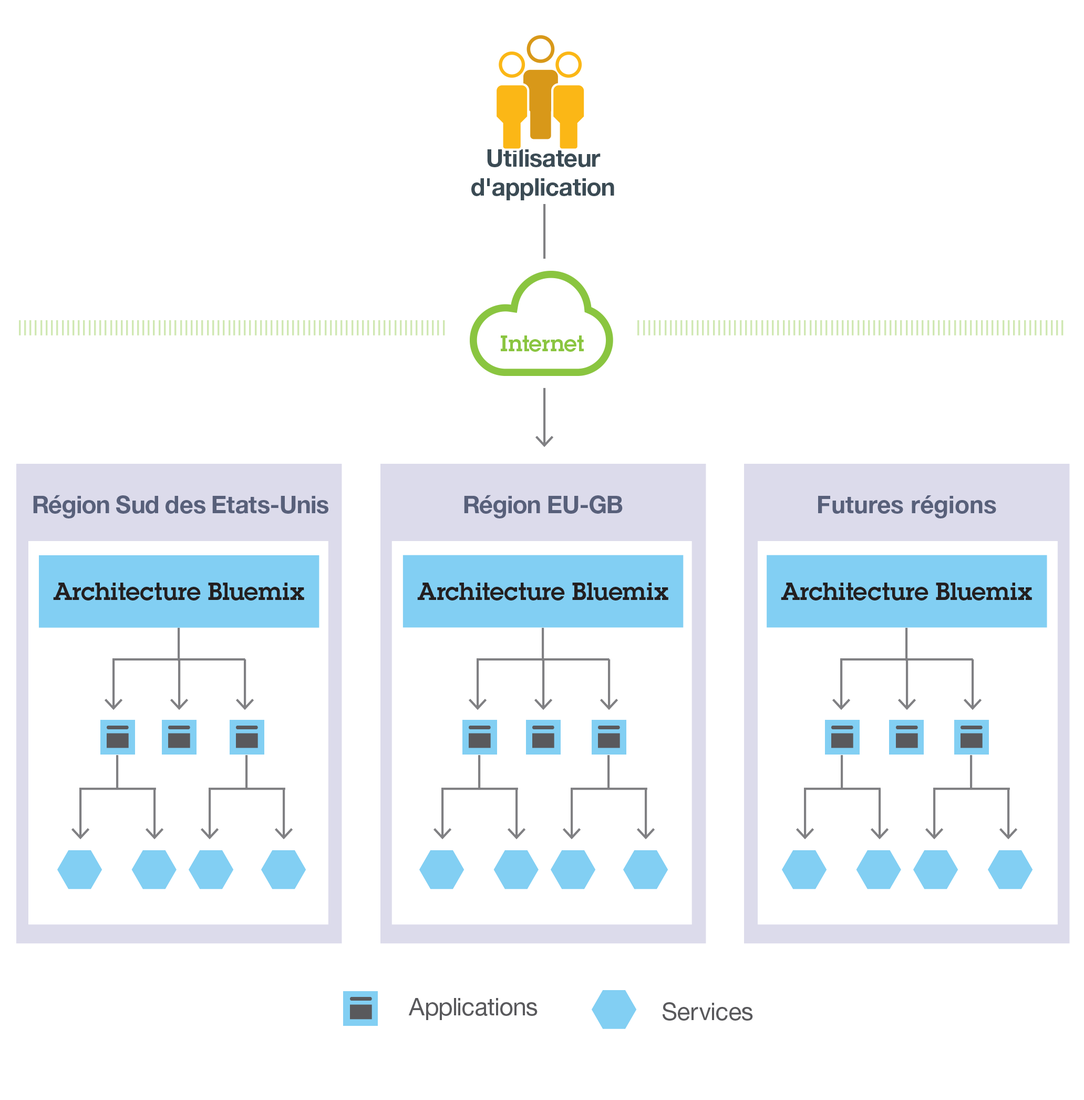
<style>
.page{position:relative;width:1084px;height:1100px;background:#ffffff}
.page>*{position:absolute;margin:0}
.t1{font:24.1px "HelvNeueBoldforIBM";color:#3b4b54}
.t2{font:21.9px "LubalinDemiforIBM";color:#8ac540}
.t3{font:24.1px "HelvNeueBoldforIBM";color:#58607a}
.t4{font:24.1px "HelveticaNeue-Bold";color:#58607a}
.t5{font:24.1px "LubalinDemiforIBM";color:#231f20}
.t6{font:24.1px "HelvNeueRomanforIBM";color:#59595c}
</style>
<div class="page">
<p class="t1" style="left:471px;top:149px;width:143px;height:51px;text-align:center">Utilisateur d'application</p>
<p class="t2" style="left:501px;top:335px;width:83px;height:17px">Internet</p>
<p class="t3" style="left:33px;top:495px;width:296px;height:23px">Région Sud des Etats-Unis</p>
<p class="t3" style="left:464px;top:495px;width:159px;height:23px">Région EU-GB</p>
<p class="t4" style="left:818px;top:495px;width:179px;height:23px">Futures régions</p>
<p class="t5" style="left:53px;top:582px;width:251px;height:18px">Architecture Bluemix</p>
<p class="t5" style="left:417px;top:582px;width:252px;height:18px">Architecture Bluemix</p>
<p class="t5" style="left:781px;top:582px;width:251px;height:18px">Architecture Bluemix</p>
<p class="t6" style="left:408px;top:998px;width:130px;height:22px">Applications</p>
<p class="t6" style="left:663px;top:1002px;width:90px;height:18px">Services</p>
</div>
